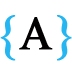
<style>
.page{position:relative;width:72px;height:72px;background:#ffffff}
.page>*{position:absolute;margin:0}
.t1{font:48px "TimesNewRomanPSMT";color:#25b5f1;font-weight:bold}
.t2{font:45.3px "TimesNewRomanPSMT";color:#020000;font-weight:bold}
</style>
<div class="page">
<p class="t1" style="left:0px;top:15px;width:72px;height:46px">{<span class="t2">A</span>}</p>
</div>
